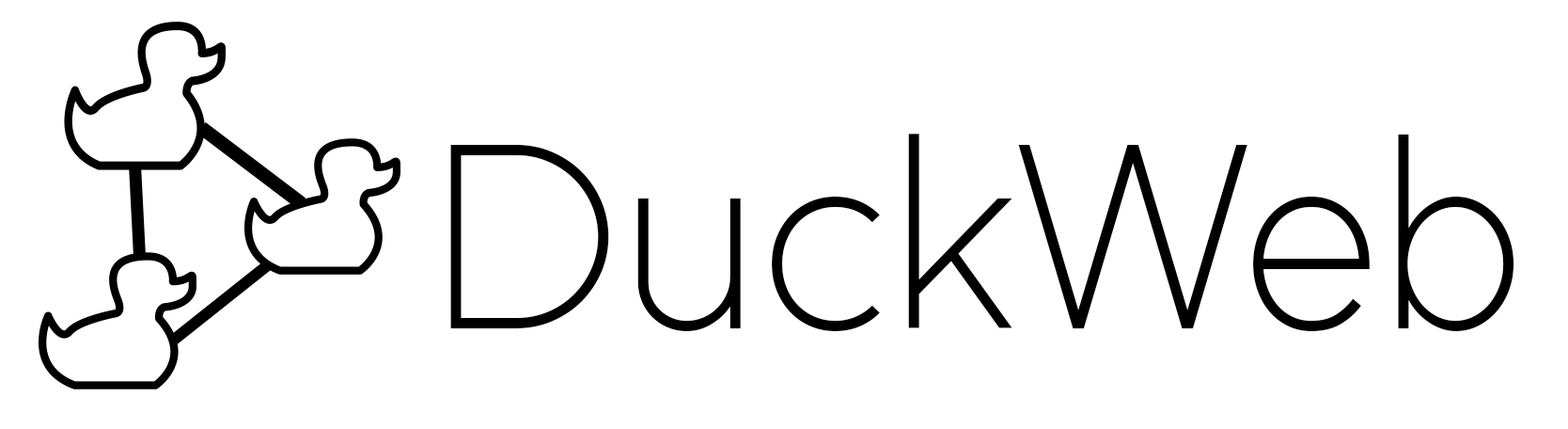
<style>
.page{position:relative;width:1568px;height:429px;background:#ffffff}
.page>*{position:absolute;margin:0}
.t1{font:258.5px "Dual-300";color:#000000}
</style>
<div class="page">
<p class="t1" style="left:450px;top:133px;width:1064px;height:198px">DuckWeb</p>
</div>
